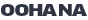
<style>
.page{position:relative;width:88px;height:20px;background:#ffffff}
.page>*{position:absolute;margin:0}
.t1{font:16px "Mob";color:#303641;text-transform:uppercase}
</style>
<div class="page">
<p class="t1" style="left:0px;top:4px;width:87px;height:12px">oohana</p>
</div>
